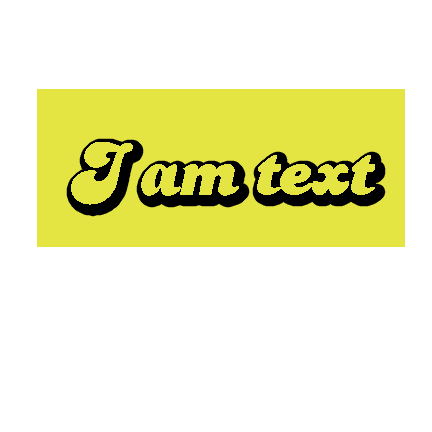
<style>
.page{position:relative;width:432px;height:432px;background:#ffffff}
.page>*{position:absolute;margin:0}
.t1{font:80px "Dolphins";letter-spacing:-0.025em;color:#e4e542}
</style>
<div class="page">
<p class="t1" style="left:71px;top:142px;width:304px;height:63px">I am text</p>
</div>
